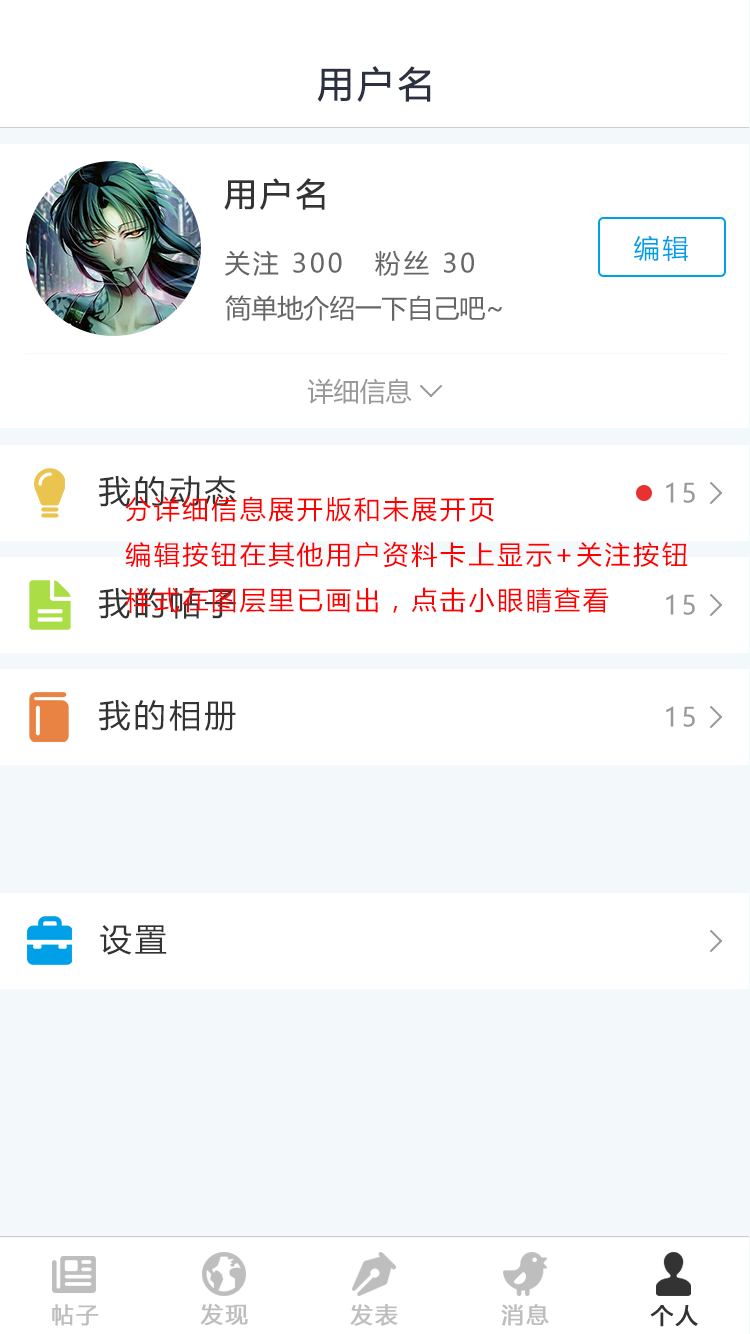
<style>
.page{position:relative;width:750px;height:1334px;background:#ffffff}
.page>*{position:absolute;margin:0}
.t1{font:36px "MicrosoftYaHei";letter-spacing:0.1em;color:#2b313f;font-weight:bold}
.t2{font:32px "MicrosoftYaHei";letter-spacing:0.1em;color:#333333;font-weight:bold}
.t3{font:26px "MicrosoftYaHei";letter-spacing:0.1em;color:#00a0e9}
.t4{font:26px "MicrosoftYaHei";letter-spacing:0.1em;color:#666666}
.t5{font:26px "MicrosoftYaHei";color:#666666}
.t6{font:26px "MicrosoftYaHei";color:#999999}
.t7{font:32px "MicrosoftYaHei";letter-spacing:0.1em;color:#333333}
.t8{font:26px "MicrosoftYaHei";letter-spacing:0.1em;color:#999999}
.t9{font:26px "MicrosoftYaHei";letter-spacing:0.1em;color:#ff0000}
.t10{font:22px "MicrosoftYaHei";letter-spacing:0.1em;color:#bebebe;font-weight:bold}
.t11{font:22px "MicrosoftYaHei";letter-spacing:0.1em;color:#35334a;font-weight:bold}
</style>
<div class="page">
<p class="t1" style="left:317px;top:66px;width:114px;height:36px">用户名</p>
<p class="t2" style="left:224px;top:178px;width:101px;height:32px">用户名</p>
<p class="t3" style="left:634px;top:235px;width:54px;height:26px">编辑</p>
<p class="t4" style="left:225px;top:250px;width:117px;height:26px">关注 300</p>
<p class="t4" style="left:375px;top:250px;width:99px;height:26px">粉丝 30</p>
<p class="t5" style="left:225px;top:295px;width:277px;height:26px">简单地介绍一下自己吧~</p>
<p class="t6" style="left:307px;top:378px;width:105px;height:26px">详细信息</p>
<p class="t7" style="left:99px;top:475px;width:137px;height:32px">我的动态</p>
<p class="t8" style="left:666px;top:482px;width:29px;height:21px">15</p>
<p class="t9" style="left:125px;top:496px;width:563px;height:117px">分详细信息展开版和未展开页<br>编辑按钮在其他用户资料卡上显示+关注按钮<br>样式在图层里已画出，点击小眼睛查看</p>
<p class="t7" style="left:99px;top:588px;width:137px;height:31px">我的帖子</p>
<p class="t8" style="left:666px;top:594px;width:29px;height:21px">15</p>
<p class="t7" style="left:99px;top:700px;width:137px;height:31px">我的相册</p>
<p class="t8" style="left:666px;top:706px;width:29px;height:21px">15</p>
<p class="t7" style="left:100px;top:925px;width:67px;height:30px">设置</p>
<p class="t10" style="left:52px;top:1304px;width:47px;height:22px">帖子</p>
<p class="t10" style="left:200px;top:1303px;width:48px;height:23px">发现</p>
<p class="t10" style="left:350px;top:1304px;width:48px;height:22px">发表</p>
<p class="t10" style="left:501px;top:1304px;width:48px;height:22px">消息</p>
<p class="t11" style="left:650px;top:1305px;width:48px;height:22px">个人</p>
</div>
